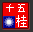
<style>
.page{position:relative;width:33px;height:32px;background:#f20000}
.page>*{position:absolute;margin:0}
.t1{font:10.4px "SimSun";color:#ffffff}
.t2{font:11.7px "SimSun";color:#ffffff}
</style>
<div class="page">
<p class="t1" style="left:6px;top:4px;width:19px;height:8px">十五</p>
<p class="t2" style="left:16px;top:15px;width:11px;height:12px">桂</p>
</div>
